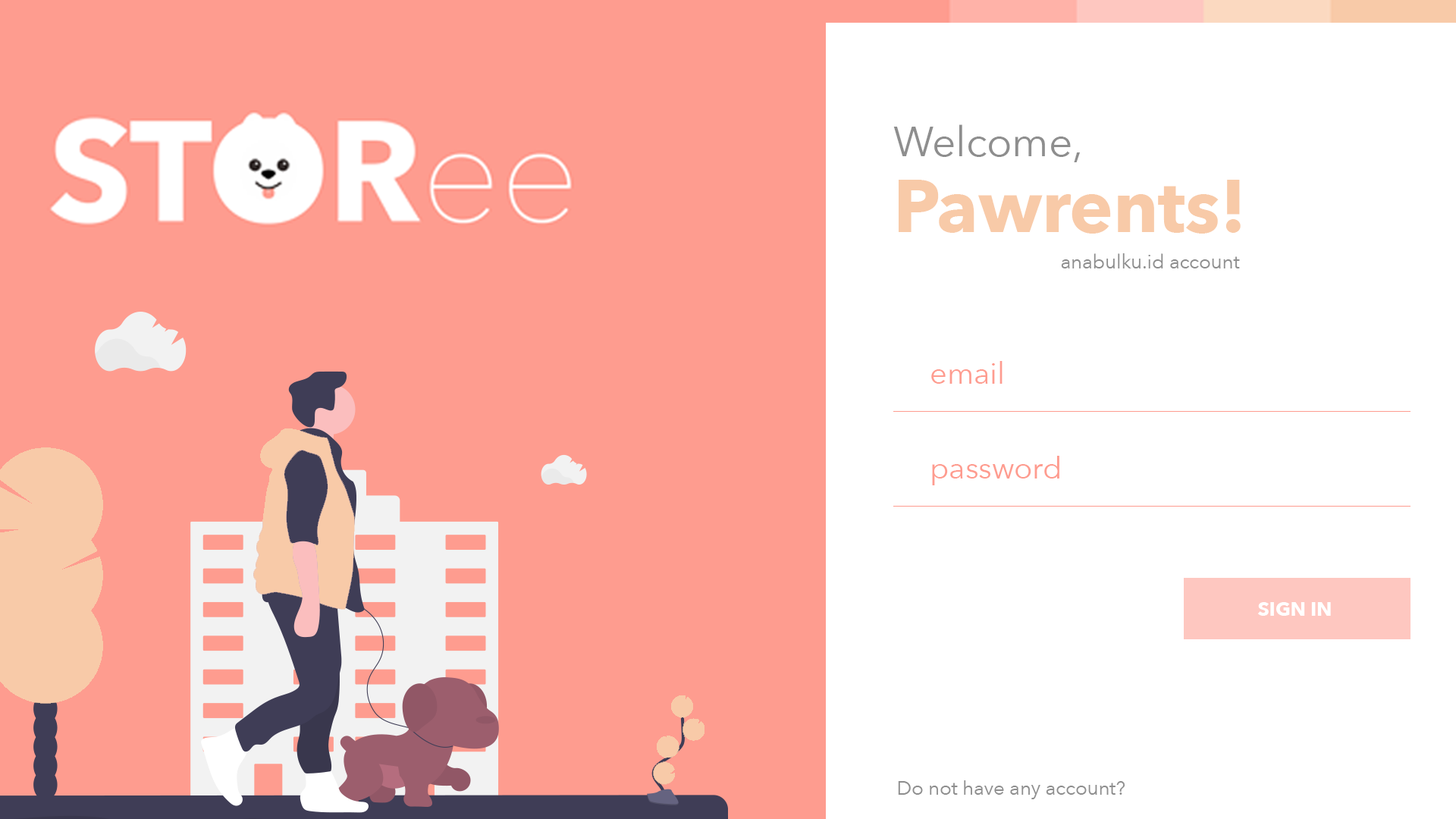
<style>
.page{position:relative;width:1456px;height:819px;background:#fe9c8f}
.page>*{position:absolute;margin:0}
.t1{font:73.3px/75.4px "AvenirNext-Bold";color:#f8caa8}
.t2{font:41.4px/41.3px "AvenirNext-Regular";color:#8e8e8e}
.t3{font:19.4px "AvenirNext-Regular";color:#8e8e8e}
.t4{font:30px "AvenirNext-Regular";color:#fe9c8f}
.t5{font:19.4px "AvenirNext-Bold";color:#ffffff}
</style>
<div class="page">
<p class="t1" style="left:893px;top:124px;width:348px;height:110px"><span class="t2">Welcome, <br></span>Pawrents!</p>
<p class="t3" style="left:1061px;top:253px;width:179px;height:15px">anabulku.id account</p>
<p class="t4" style="left:931px;top:361px;width:72px;height:23px">email</p>
<p class="t4" style="left:932px;top:456px;width:127px;height:29px">password</p>
<p class="t5" style="left:1257px;top:602px;width:74px;height:14px">SIGN IN</p>
<p class="t3" style="left:898px;top:780px;width:227px;height:19px">Do not have any account?</p>
</div>
